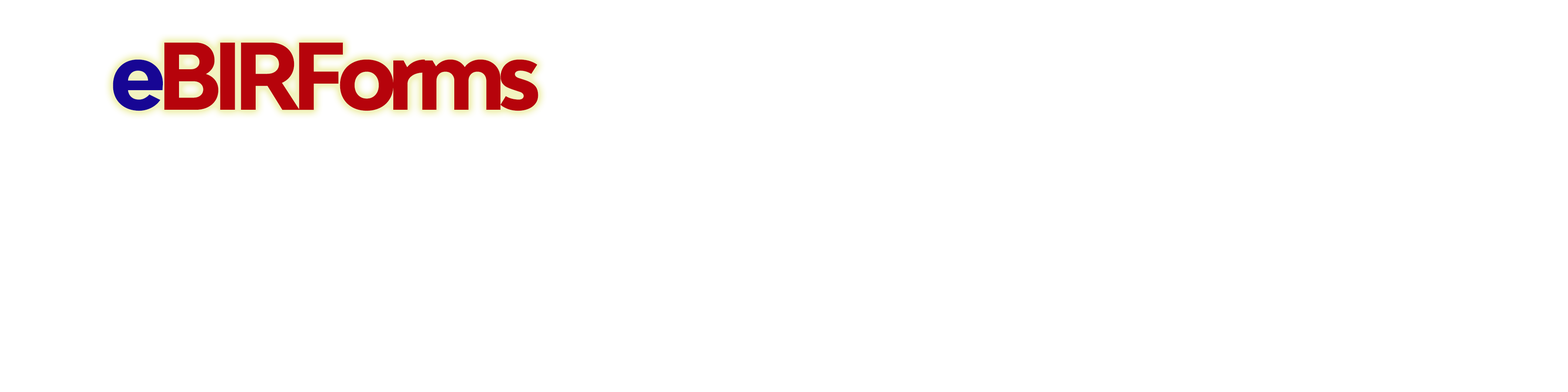
<style>
.page{position:relative;width:1568px;height:392px;background:#ffffff}
.page>*{position:absolute;margin:0}
.t1{font:90.7px "Adlinnaka-BoldDemo";letter-spacing:-0.1em;color:#b6030b}
.t2{font:90.7px "Adlinnaka-BoldDemo";letter-spacing:-0.1em;color:#170694}
</style>
<div class="page">
<p class="t1" style="left:113px;top:42px;width:425px;height:69px"><span class="t2">e</span>BIRForms</p>
</div>
